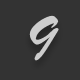
<style>
.page{position:relative;width:80px;height:80px;background:#333333}
.page>*{position:absolute;margin:0}
.t1{font:65.9px "SCFwxz";color:#cdcdcd}
</style>
<div class="page">
<p class="t1" style="left:29px;top:15px;width:30px;height:46px">9</p>
</div>
